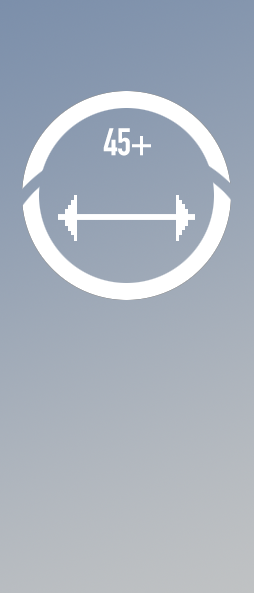
<style>
.page{position:relative;width:254px;height:593px}
.page>*{position:absolute;margin:0}
.t1{font:38px "DINCondensed-Bold";letter-spacing:-0.02em;color:#ffffff}
</style>
<div class="page">
<p class="t1" style="left:103px;top:128px;width:48px;height:28px">45+</p>
</div>
